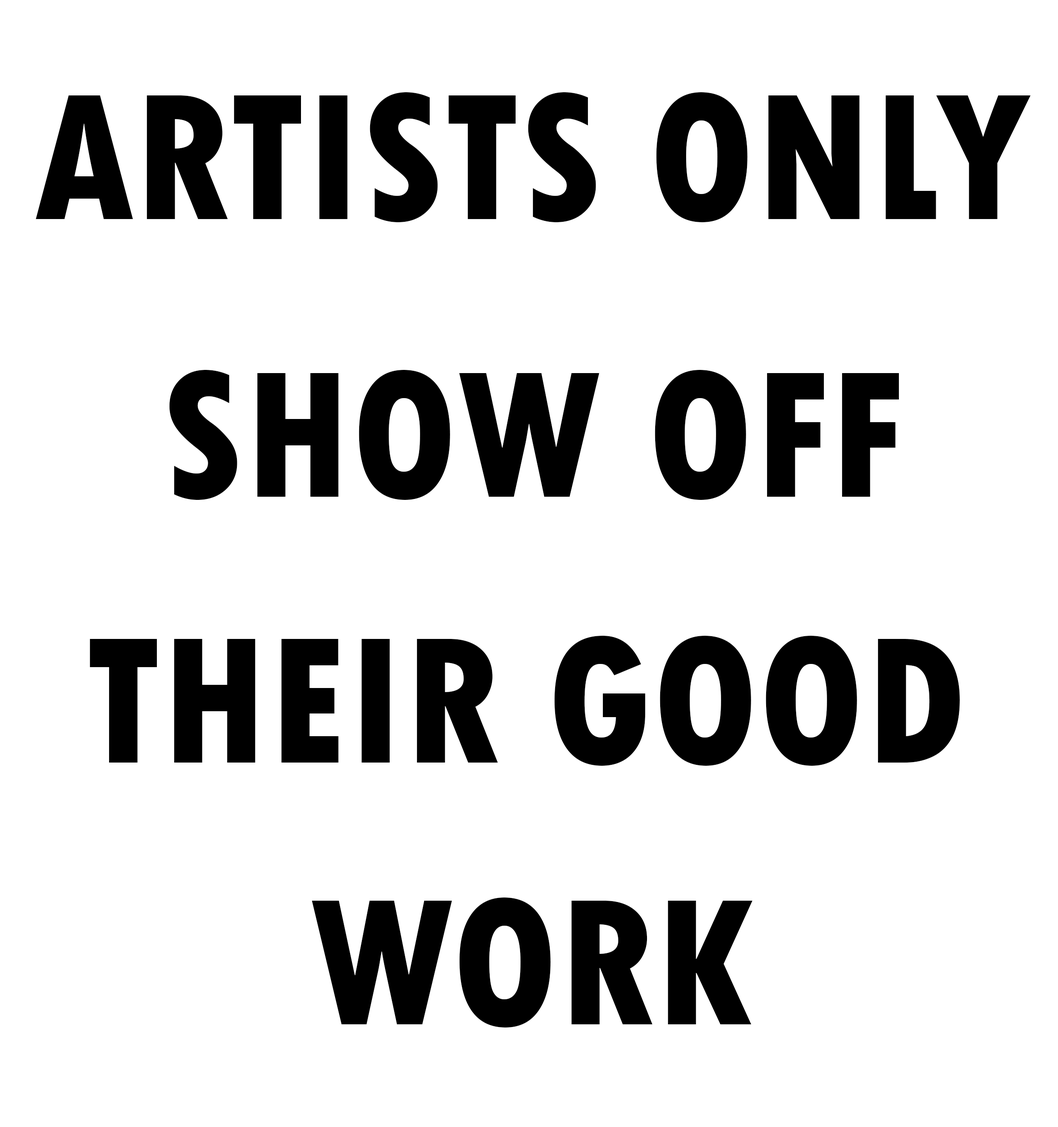
<style>
.page{position:relative;width:1058px;height:1127px;background:#ffffff}
.page>*{position:absolute;margin:0}
.t1{font:189.4px "TwCenMT-CondensedExtraBold";color:#000000}
</style>
<div class="page">
<p class="t1" style="left:35px;top:92px;width:995px;height:130px">ARTISTS ONLY</p>
<p class="t1" style="left:169px;top:370px;width:730px;height:130px">SHOW OFF</p>
<p class="t1" style="left:90px;top:636px;width:870px;height:130px">THEIR GOOD</p>
<p class="t1" style="left:312px;top:898px;width:440px;height:130px">WORK</p>
</div>
